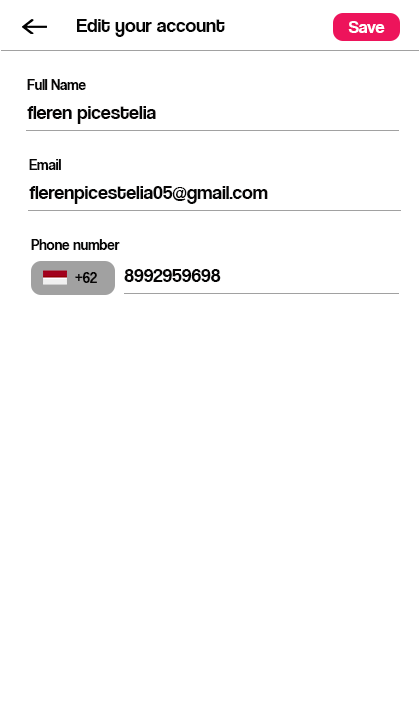
<style>
.page{position:relative;width:420px;height:720px;background:#ffffff}
.page>*{position:absolute;margin:0}
.t1{font:20px "CoolveticaRg-Regular";color:#050505}
.t2{font:18px "CoolveticaRg-Regular";color:#ffffff}
.t3{font:15px "CoolveticaRg-Regular";color:#070606}
.t4{font:20px "CoolveticaRg-Regular";color:#070606}
</style>
<div class="page">
<p class="t1" style="left:77px;top:19px;width:148px;height:18px">Edit your account</p>
<p class="t2" style="left:348px;top:21px;width:37px;height:12px">Save</p>
<p class="t3" style="left:27px;top:79px;width:59px;height:11px">Full Name</p>
<p class="t4" style="left:27px;top:106px;width:129px;height:18px">fleren picestelia</p>
<p class="t3" style="left:29px;top:159px;width:32px;height:11px">Email</p>
<p class="t4" style="left:29px;top:186px;width:239px;height:18px">flerenpicestelia05@gmail.com</p>
<p class="t3" style="left:31px;top:239px;width:89px;height:11px">Phone number</p>
<p class="t4" style="left:124px;top:269px;width:97px;height:13px">8992959698</p>
<p class="t3" style="left:75px;top:272px;width:22px;height:11px">+62</p>
</div>
